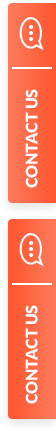
<style>
.page{position:relative;width:56px;height:431px}
.page>*{position:absolute;margin:0}
.t1{font:16px "Lato-Black";color:#ffffff;text-transform:uppercase}
</style>
<div class="page">
<p class="t1" style="left:25px;top:305px;width:13px;height:99px;rotate:-90deg">Contact Us</p>
</div>
